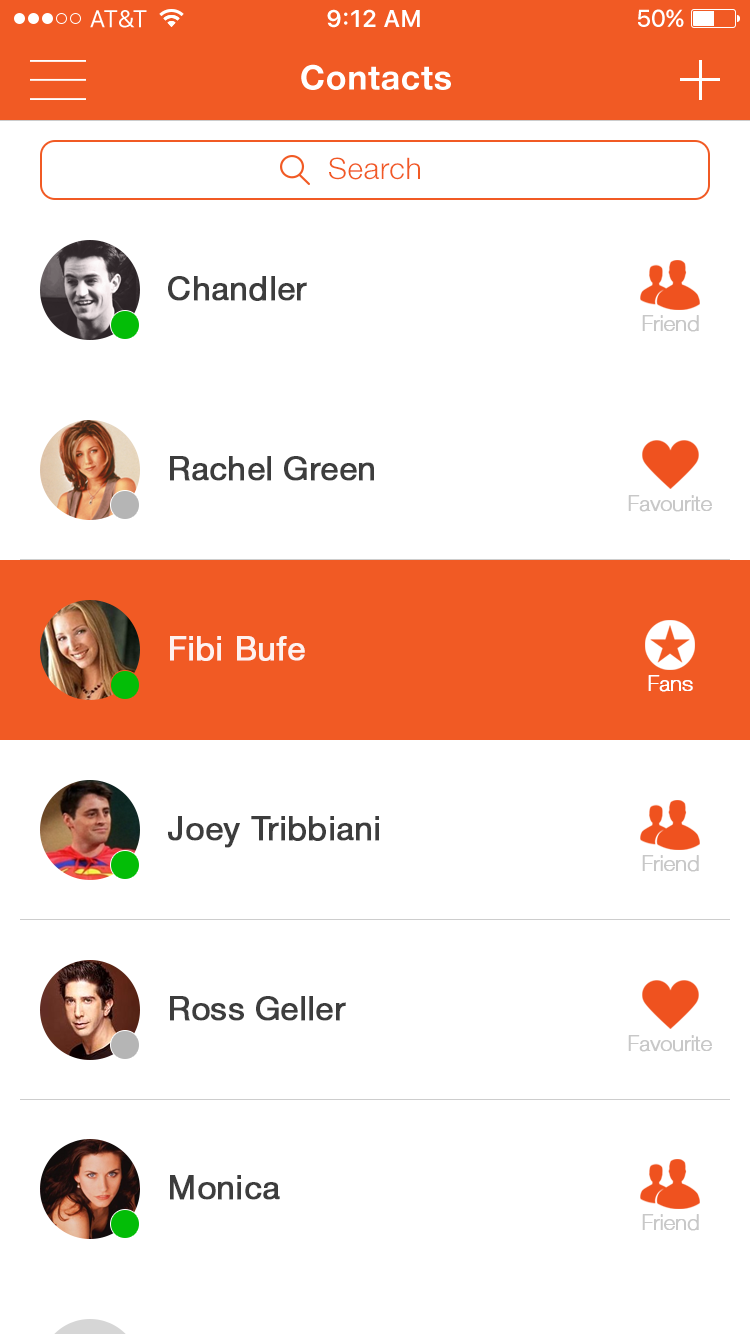
<style>
.page{position:relative;width:750px;height:1334px;background:#ffffff}
.page>*{position:absolute;margin:0}
.t1{font:34px "HelveticaNeueCyr-Bold";letter-spacing:0.02em;color:#ffffff}
.t2{font:30px "HelveticaNeueCyr-Light";letter-spacing:0.02em;color:#f15a24}
.t3{font:32.9px "HelveticaNeueCyr-Roman";color:#3d3d3d;font-weight:bold}
.t4{font:21.3px "HelveticaNeueCyr-Thin";color:#c8c8c8;font-weight:bold}
.t5{font:32.9px "HelveticaNeueCyr-Roman";color:#ffffff;font-weight:bold}
.t6{font:21.3px "HelveticaNeueCyr-Thin";color:#ffffff;font-weight:bold}
</style>
<div class="page">
<p class="t1" style="left:301px;top:64px;width:150px;height:26px">Contacts</p>
<p class="t2" style="left:329px;top:157px;width:91px;height:23px">Search</p>
<p class="t3" style="left:168px;top:276px;width:139px;height:25px">Chandler</p>
<p class="t4" style="left:642px;top:315px;width:57px;height:17px">Friend</p>
<p class="t3" style="left:170px;top:456px;width:204px;height:25px">Rachel Green</p>
<p class="t4" style="left:628px;top:495px;width:84px;height:17px">Favourite</p>
<p class="t5" style="left:170px;top:636px;width:135px;height:25px;opacity:0.9">Fibi Bufe</p>
<p class="t6" style="left:648px;top:675px;width:45px;height:17px">Fans</p>
<p class="t3" style="left:168px;top:816px;width:211px;height:32px">Joey Tribbiani</p>
<p class="t4" style="left:642px;top:855px;width:57px;height:17px">Friend</p>
<p class="t3" style="left:170px;top:996px;width:176px;height:25px">Ross Geller</p>
<p class="t4" style="left:628px;top:1035px;width:84px;height:17px">Favourite</p>
<p class="t3" style="left:170px;top:1175px;width:110px;height:25px">Monica</p>
<p class="t4" style="left:642px;top:1214px;width:57px;height:17px">Friend</p>
</div>
